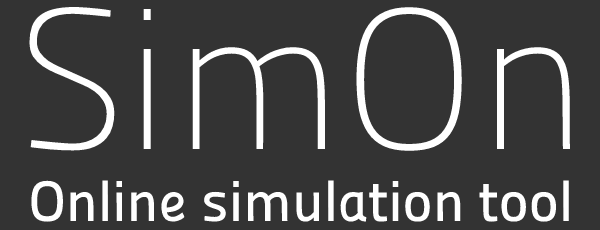
<style>
.page{position:relative;width:600px;height:230px;background:#333333}
.page>*{position:absolute;margin:0}
.t1{font:200px "Panefresco1wt-Regular";color:#ffffff}
.t2{font:57px "Panefresco600wt-Regular";color:#ffffff}
</style>
<div class="page">
<p class="t1" style="left:29px;top:7px;width:541px;height:144px">SimOn</p>
<p class="t2" style="left:31px;top:180px;width:538px;height:42px">Online simulation tool</p>
</div>
